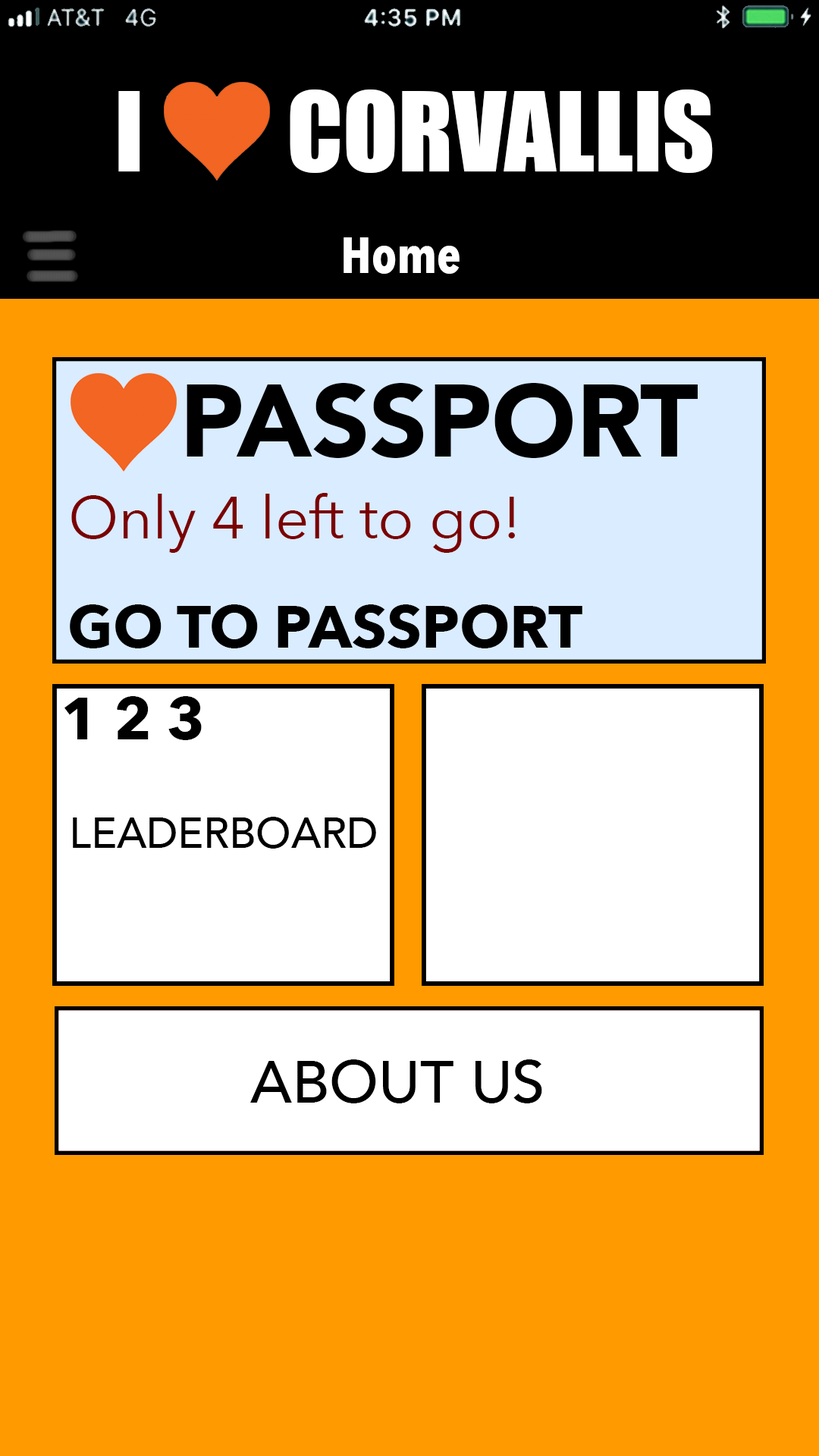
<style>
.page{position:relative;width:819px;height:1456px;background:#ff9a00}
.page>*{position:absolute;margin:0}
.t1{font:101.4px "Impact";color:#ffffff}
.t2{font:50.7px "AvenirNextCondensed-Bold";color:#ffffff}
.t3{font:101.4px "Avenir-Black";color:#000000}
.t4{font:59.1px "AvenirNext-Regular";color:#7b0000}
.t5{font:59.1px "AvenirNext-Bold";color:#000000}
.t6{font:42.2px "Avenir-Medium";color:#000000}
.t7{font:59.1px "Avenir-Medium";color:#010101}
</style>
<div class="page">
<p class="t1" style="left:118px;top:89px;width:595px;height:84px">I        CORVALLIS</p>
<p class="t2" style="left:344px;top:237px;width:116px;height:37px">Home</p>
<p class="t3" style="left:187px;top:383px;width:511px;height:75px">PASSPORT</p>
<p class="t4" style="left:71px;top:493px;width:444px;height:60px">Only 4 left to go!</p>
<p class="t5" style="left:70px;top:604px;width:512px;height:44px">GO TO PASSPORT</p>
<p class="t5" style="left:64px;top:696px;width:138px;height:44px">1 2 3</p>
<p class="t6" style="left:73px;top:817px;width:303px;height:32px">LEADERBOARD</p>
<p class="t7" style="left:250px;top:1059px;width:292px;height:44px">ABOUT US</p>
</div>
